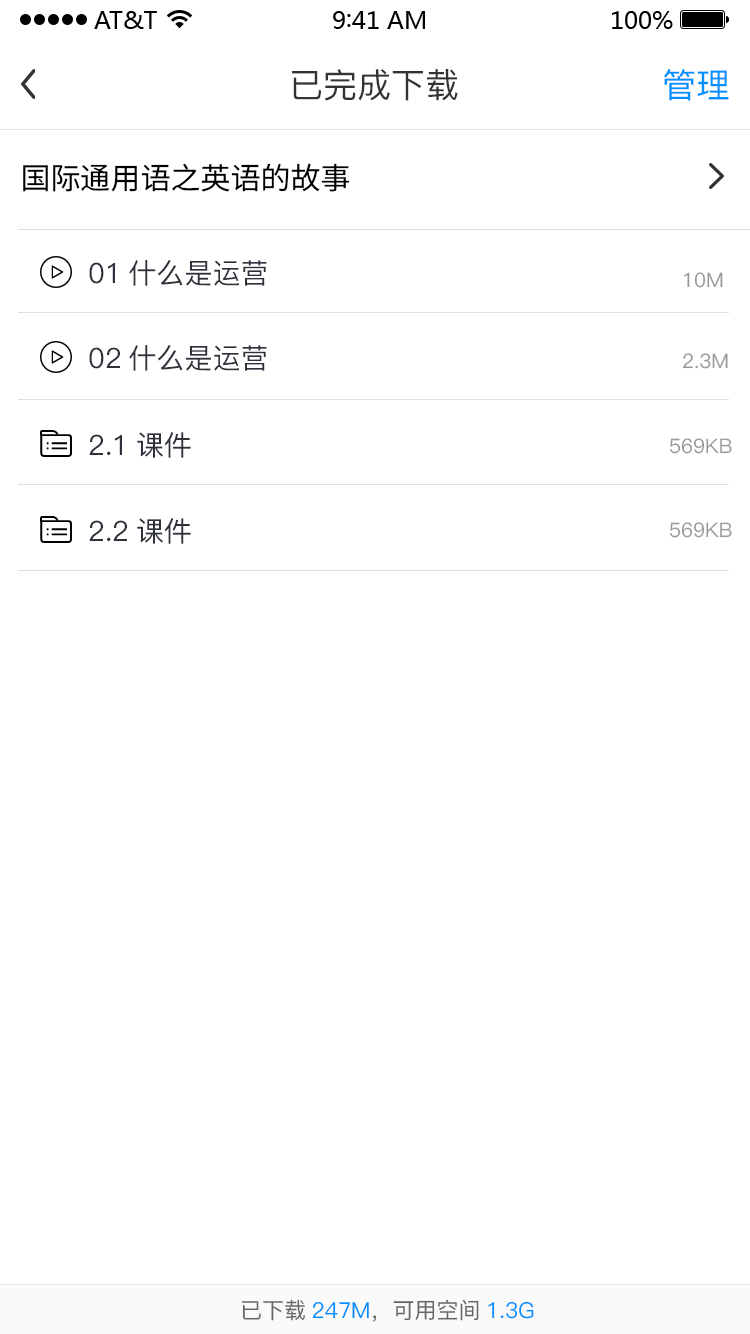
<style>
.page{position:relative;width:750px;height:1334px;background:#ffffff}
.page>*{position:absolute;margin:0}
.t1{font:34px "PingFang-SC-Medium";color:#333333}
.t2{font:34px "PingFang-SC-Medium";color:#0090ff}
.t3{font:30px "SourceHanSansCN-Regular";color:#000000}
.t4{font:28px "PingFang-SC-Medium";color:#2e313a}
.t5{font:20px "PingFang-SC-Medium";color:#999999}
.t6{font:22px "PingFang-SC-Medium";color:#666666}
.t7{font:22px "PingFang-SC-Medium";color:#0090ff}
</style>
<div class="page">
<p class="t1" style="left:292px;top:69px;width:166px;height:32px">已完成下载</p>
<p class="t2" style="left:663px;top:69px;width:66px;height:32px">管理</p>
<p class="t3" style="left:23px;top:163px;width:327px;height:29px">国际通用语之英语的故事</p>
<p class="t4" style="left:89px;top:260px;width:178px;height:26px">01什么是运营</p>
<p class="t5" style="left:684px;top:272px;width:39px;height:16px">10M</p>
<p class="t4" style="left:89px;top:345px;width:178px;height:26px">02什么是运营</p>
<p class="t5" style="left:683px;top:353px;width:45px;height:16px">2.3M</p>
<p class="t4" style="left:89px;top:432px;width:102px;height:26px">2.1课件</p>
<p class="t5" style="left:670px;top:438px;width:62px;height:16px">569KB</p>
<p class="t4" style="left:89px;top:518px;width:102px;height:26px">2.2课件</p>
<p class="t5" style="left:670px;top:522px;width:62px;height:16px">569KB</p>
<p class="t6" style="left:242px;top:1299px;width:292px;height:23px">已下载<span class="t7">247M</span>，可用空间<span class="t7">1.3G</span></p>
</div>
